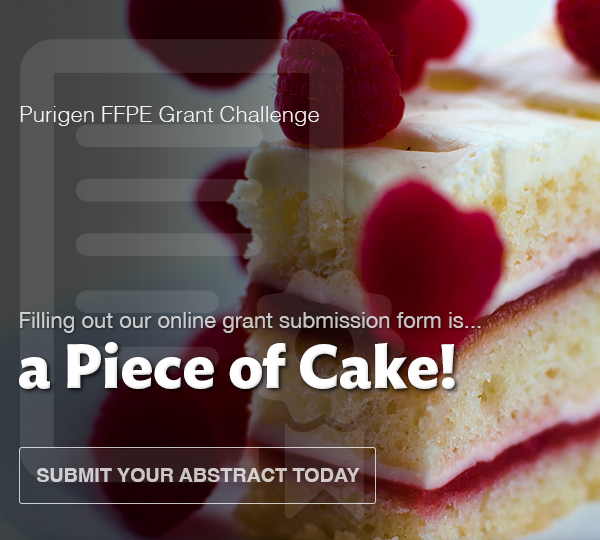
<style>
.page{position:relative;width:600px;height:540px}
.page>*{position:absolute;margin:0}
.t1{font:22px "Helvetica-Light";color:#ffffff}
.t2{font:22px "HelveticaNeue";color:#cbc5c6}
.t3{font:61.3px "IdealSans-Bold";letter-spacing:-0.005em;color:#ffffff}
.t4{font:20px "Helvetica-Bold";letter-spacing:-0.01em;color:#cfc8c8;text-transform:uppercase}
</style>
<div class="page">
<p class="t1" style="left:20px;top:106px;width:299px;height:20px;opacity:0.9">Purigen FFPE Grant Challenge</p>
<p class="t2" style="left:20px;top:312px;width:461px;height:21px">Filling out our online grant submission form is...</p>
<p class="t3" style="left:19px;top:342px;width:436px;height:47px">a Piece of Cake!</p>
<p class="t4" style="left:37px;top:468px;width:323px;height:14px">Submit YOUR ABSTRACT Today</p>
</div>
